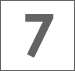
<style>
.page{position:relative;width:75px;height:71px;background:#ffffff}
.page>*{position:absolute;margin:0}
.t1{font:58.9px "CenturyGothic-Bold";color:#636363}
</style>
<div class="page">
<p class="t1" style="left:25px;top:14px;width:29px;height:44px">7</p>
</div>
